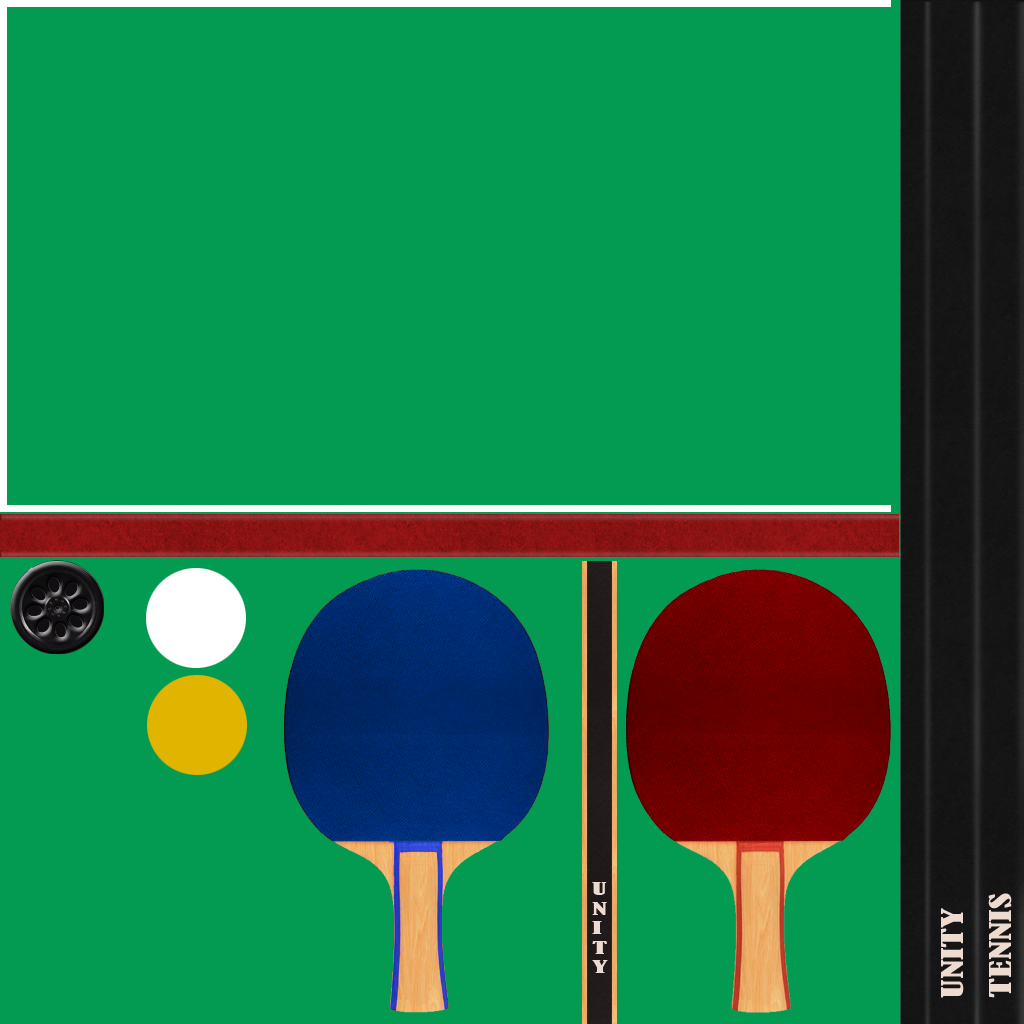
<style>
.page{position:relative;width:1024px;height:1024px;background:#039a51}
.page>*{position:absolute;margin:0}
.t1{font:16.2px "BernardMT-Condensed";color:#eddbcf;scale:2.02 1}
.t2{font:28px "BernardMT-Condensed";color:#eddbcf;scale:1.51 1}
</style>
<div class="page">
<p class="t1" style="left:592px;top:882px;width:16px;height:91px">U<br>N<br>I<br>T<br>Y</p>
<p class="t2" style="left:988px;top:893px;width:24px;height:105px;rotate:-90deg">TENNIS</p>
<p class="t2" style="left:941px;top:908px;width:23px;height:90px;rotate:-90deg">UNITY</p>
</div>
